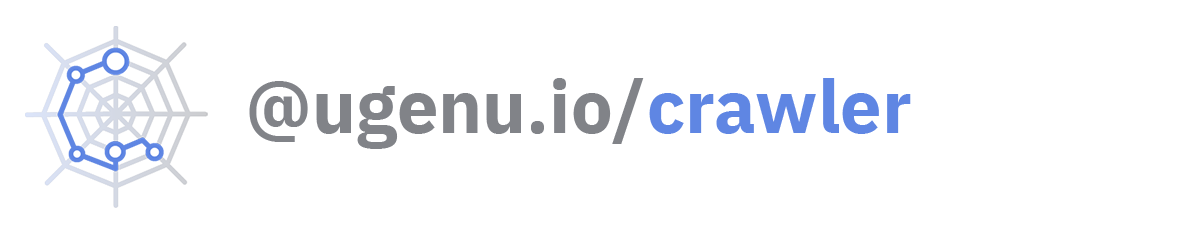
<style>
.page{position:relative;width:1200px;height:232px;background:#ffffff}
.page>*{position:absolute;margin:0}
.t1{font:74px "IBMPlexSans-Bold";color:#818388}
.t2{font:74px "IBMPlexSans-Bold";color:#5f86e3}
.t3{font:74px "IBMPlexSans";color:#191d27}
</style>
<div class="page">
<p class="t1" style="left:249px;top:78px;width:395px;height:71px">@ugenu.io/</p>
<p class="t2" style="left:649px;top:78px;width:262px;height:56px"><span class="t3">                      </span>crawler</p>
</div>
